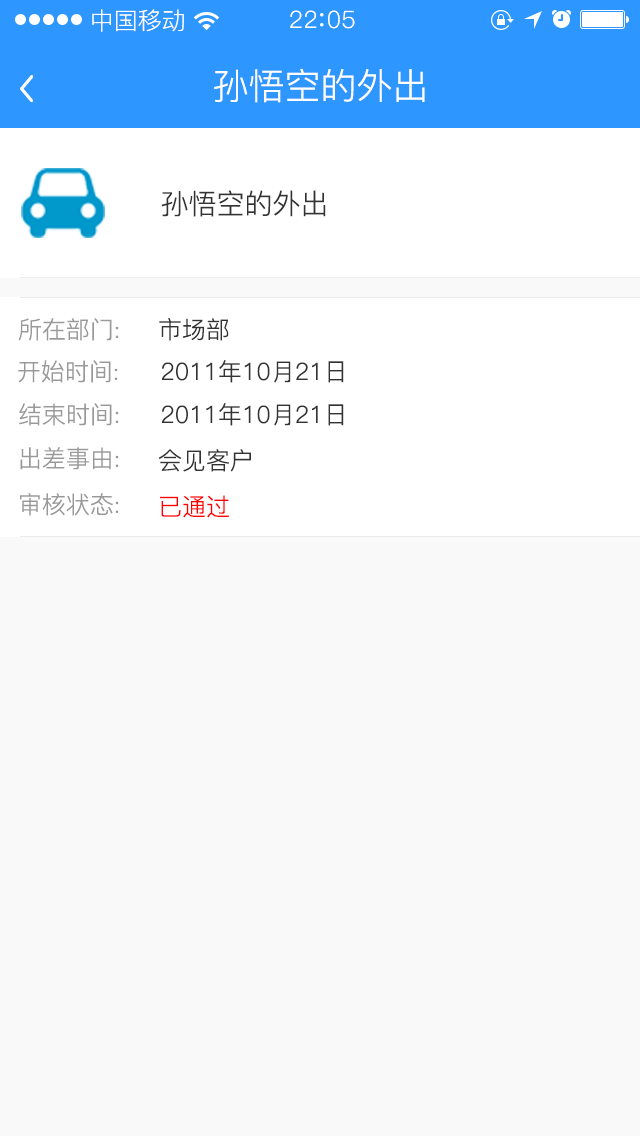
<style>
.page{position:relative;width:640px;height:1136px;background:#f9f9f9}
.page>*{position:absolute;margin:0}
.t1{font:24px "PingFang-SC-Regular";color:#ffffff}
.t2{font:24px "PingFang-SC-Regular";letter-spacing:0.03em;color:#ffffff}
.t3{font:36px "PingFang-SC-Regular";color:#ffffff}
.t4{font:28px "PingFang-SC-Regular";color:#333333}
.t5{font:24px "PingFang-SC-Regular";color:#999999}
.t6{font:24px "PingFang-SC-Regular";color:#333333}
.t7{font:24px "PingFang-SC-Regular";color:#ff0000}
</style>
<div class="page">
<p class="t1" style="left:92px;top:9px;width:92px;height:23px">中国移动</p>
<p class="t2" style="left:290px;top:10px;width:65px;height:19px">22 05</p>
<p class="t3" style="left:214px;top:68px;width:211px;height:35px">孙悟空的外出</p>
<p class="t4" style="left:161px;top:190px;width:165px;height:27px">孙悟空的外出</p>
<p class="t5" style="left:18px;top:318px;width:101px;height:23px">所在部门:</p>
<p class="t6" style="left:159px;top:318px;width:70px;height:23px">市场部</p>
<p class="t5" style="left:18px;top:360px;width:100px;height:23px">开始时间:</p>
<p class="t6" style="left:162px;top:360px;width:182px;height:23px">2011年10月21日</p>
<p class="t5" style="left:19px;top:403px;width:100px;height:23px">结束时间:</p>
<p class="t6" style="left:162px;top:403px;width:182px;height:23px">2011年10月21日</p>
<p class="t5" style="left:20px;top:447px;width:99px;height:23px">出差事由:</p>
<p class="t6" style="left:158px;top:449px;width:93px;height:23px">会见客户</p>
<p class="t5" style="left:20px;top:493px;width:99px;height:23px">审核状态:</p>
<p class="t7" style="left:160px;top:495px;width:69px;height:23px">已通过</p>
</div>
